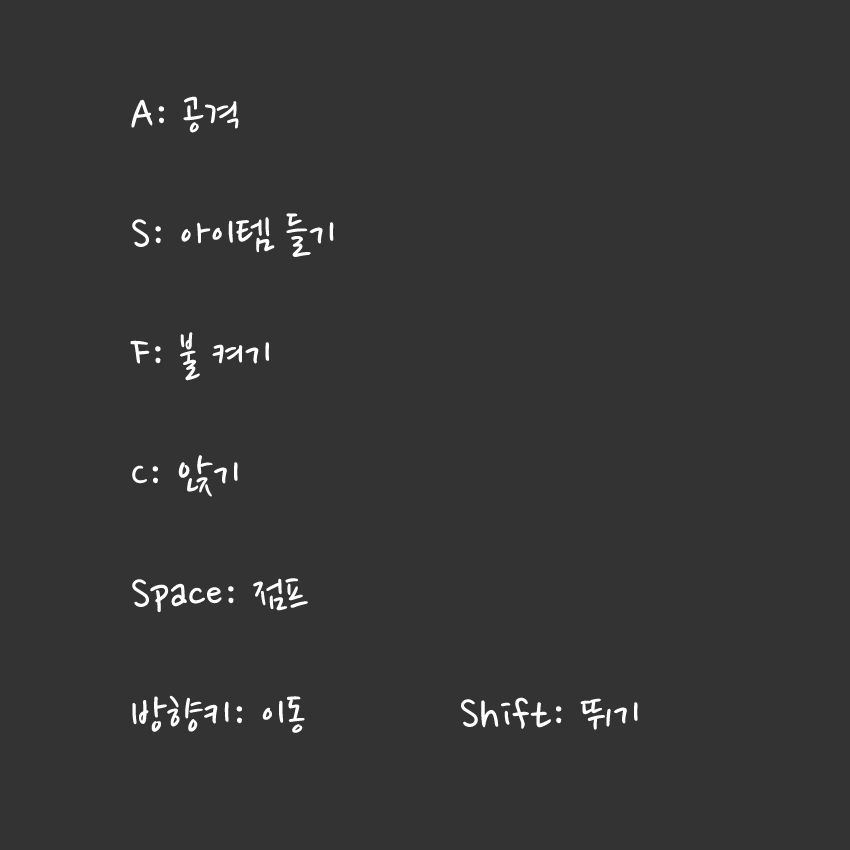
<style>
.page{position:relative;width:850px;height:850px;background:#333333}
.page>*{position:absolute;margin:0}
.t1{font:50px "NanumPen";color:#ffffff}
</style>
<div class="page">
<p class="t1" style="left:130px;top:96px;width:508px;height:637px">A: 공격<br><br>S: 아이템 들기<br><br>F: 불 켜기<br><br>C: 앉기<br><br>Space: 점프<br><br>방향키: 이동           Shift: 뛰기</p>
</div>
